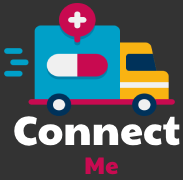
<style>
.page{position:relative;width:183px;height:180px;background:#333333}
.page>*{position:absolute;margin:0}
.t1{font:41px "PaytoneOne-Regular";color:#ffffff}
.t2{font:24px "PaytoneOne-Regular";color:#c90a51}
</style>
<div class="page">
<p class="t1" style="left:14px;top:116px;width:166px;height:30px">Connect</p>
<p class="t2" style="left:85px;top:157px;width:33px;height:18px">Me</p>
</div>
